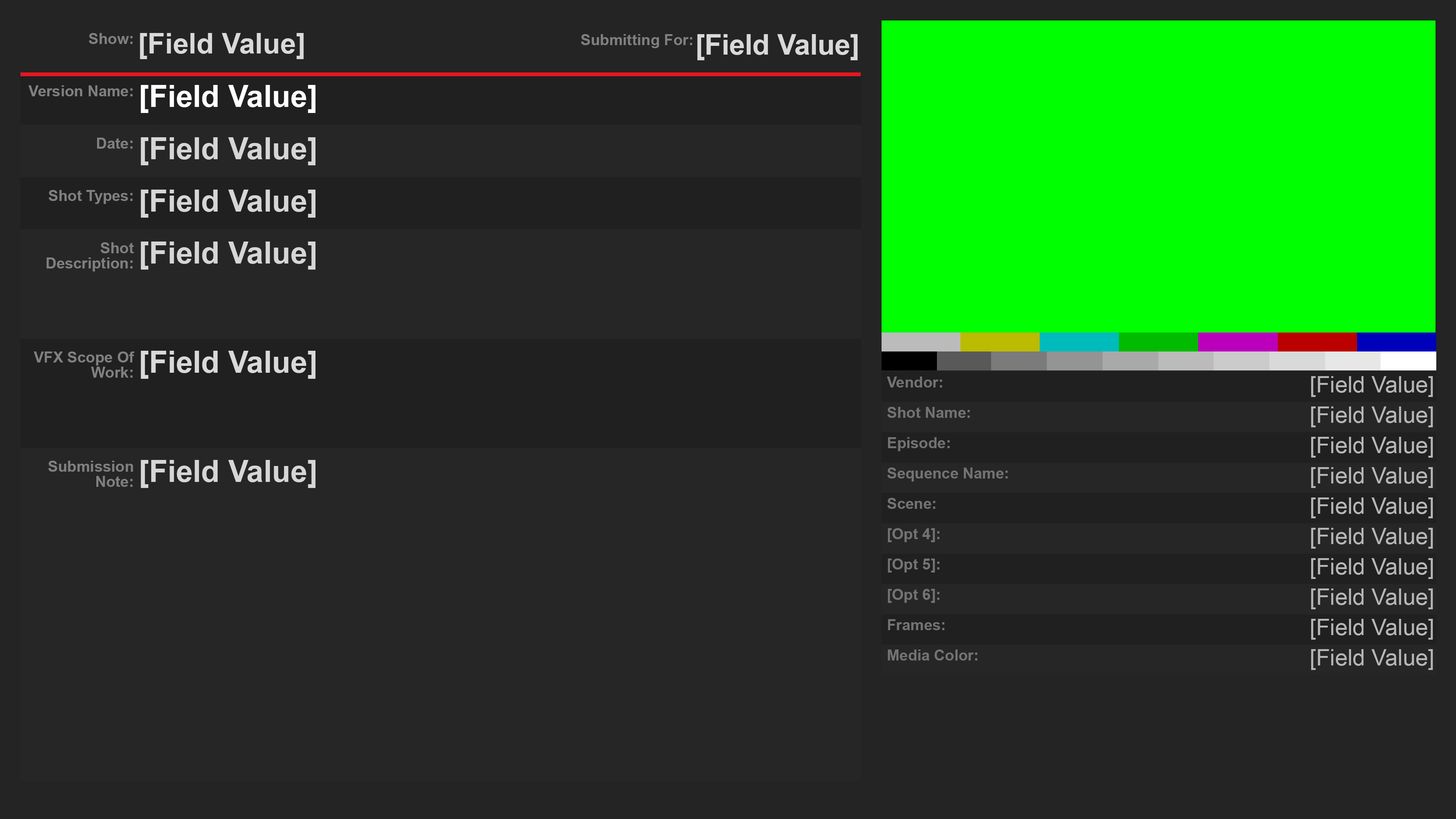
<style>
.page{position:relative;width:1456px;height:819px;background:#262626}
.page>*{position:absolute;margin:0}
.t1{font:15.2px "Arial-BoldMT";color:#888888}
.t2{font:28.4px "Arial-BoldMT";color:#d9d9d9}
.t3{font:30.3px "Arial-BoldMT";color:#ffffff}
.t4{font:30.3px "Arial-BoldMT";color:#d9d9d9}
.t5{font:15.2px/15.2px "Arial-BoldMT";color:#888888}
.t6{font:15.2px "Arial-BoldMT";color:#7b7b7b}
.t7{font:22.7px "ArialMT";color:#bbbbbc}
</style>
<div class="page">
<p class="t1" style="left:89px;top:33px;width:44px;height:11px">Show:</p>
<p class="t2" style="left:140px;top:33px;width:164px;height:26px">[Field Value]</p>
<p class="t1" style="left:581px;top:34px;width:111px;height:14px">Submitting For:</p>
<p class="t2" style="left:697px;top:34px;width:161px;height:26px">[Field Value]</p>
<p class="t1" style="left:28px;top:85px;width:105px;height:11px">Version Name:</p>
<p class="t3" style="left:141px;top:85px;width:174px;height:28px">[Field Value]</p>
<p class="t1" style="left:97px;top:138px;width:36px;height:11px">Date:</p>
<p class="t4" style="left:141px;top:137px;width:174px;height:28px">[Field Value]</p>
<p class="t1" style="left:49px;top:190px;width:84px;height:14px">Shot Types:</p>
<p class="t4" style="left:141px;top:190px;width:174px;height:28px">[Field Value]</p>
<p class="t5" style="left:47px;top:242px;width:87px;height:29px;text-align:right">Shot Description:</p>
<p class="t4" style="left:141px;top:242px;width:174px;height:28px">[Field Value]</p>
<p class="t5" style="left:34px;top:351px;width:101px;height:27px;text-align:right">VFX Scope Of Work:</p>
<p class="t4" style="left:141px;top:351px;width:174px;height:28px">[Field Value]</p>
<p class="t6" style="left:887px;top:377px;width:55px;height:11px">Vendor:</p>
<p class="t7" style="left:1311px;top:376px;width:122px;height:21px">[Field Value]</p>
<p class="t6" style="left:887px;top:407px;width:83px;height:11px">Shot Name:</p>
<p class="t7" style="left:1311px;top:406px;width:122px;height:21px">[Field Value]</p>
<p class="t6" style="left:888px;top:437px;width:62px;height:14px">Episode:</p>
<p class="t7" style="left:1311px;top:437px;width:122px;height:21px">[Field Value]</p>
<p class="t7" style="left:1311px;top:437px;width:122px;height:21px">[Field Value]</p>
<p class="t5" style="left:48px;top:461px;width:85px;height:26px;text-align:right">Submission Note:</p>
<p class="t4" style="left:141px;top:460px;width:174px;height:28px">[Field Value]</p>
<p class="t6" style="left:887px;top:468px;width:121px;height:14px">Sequence Name:</p>
<p class="t7" style="left:1311px;top:467px;width:122px;height:21px">[Field Value]</p>
<p class="t7" style="left:1311px;top:467px;width:122px;height:21px">[Field Value]</p>
<p class="t6" style="left:887px;top:498px;width:48px;height:11px">Scene:</p>
<p class="t7" style="left:1311px;top:497px;width:122px;height:21px">[Field Value]</p>
<p class="t7" style="left:1311px;top:497px;width:122px;height:21px">[Field Value]</p>
<p class="t6" style="left:888px;top:528px;width:52px;height:14px">[Opt 4]:</p>
<p class="t7" style="left:1311px;top:528px;width:122px;height:21px">[Field Value]</p>
<p class="t6" style="left:888px;top:559px;width:52px;height:14px">[Opt 5]:</p>
<p class="t7" style="left:1311px;top:558px;width:122px;height:21px">[Field Value]</p>
<p class="t6" style="left:888px;top:589px;width:52px;height:14px">[Opt 6]:</p>
<p class="t7" style="left:1311px;top:588px;width:122px;height:21px">[Field Value]</p>
<p class="t6" style="left:888px;top:619px;width:56px;height:11px">Frames:</p>
<p class="t7" style="left:1311px;top:619px;width:122px;height:21px">[Field Value]</p>
<p class="t6" style="left:888px;top:650px;width:89px;height:10px">Media Color:</p>
<p class="t7" style="left:1311px;top:649px;width:122px;height:21px">[Field Value]</p>
</div>
